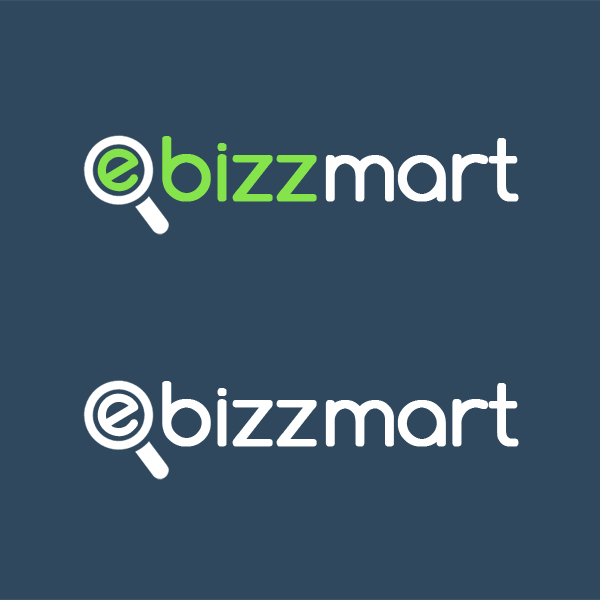
<style>
.page{position:relative;width:600px;height:600px;background:#2f485d}
.page>*{position:absolute;margin:0}
.t1{font:91.3px "Comfortaa";letter-spacing:-0.04em;color:#85e44b;font-weight:bold}
.t2{font:91.3px "Comfortaa";letter-spacing:-0.04em;color:#fefefe;font-weight:bold}
.t3{font:80px "Comfortaa-Bold";color:#85e44b}
.t4{font:91.3px "Comfortaa";letter-spacing:-0.04em;color:#ffffff;font-weight:bold}
.t5{font:80px "Comfortaa-Bold";color:#ffffff}
</style>
<div class="page">
<p class="t1" style="left:162px;top:136px;width:357px;height:66px">bizz <span class="t2">mart</span></p>
<p class="t3" style="left:97px;top:148px;width:42px;height:44px;rotate:-31deg">e</p>
<p class="t4" style="left:162px;top:381px;width:357px;height:66px">bizz mart</p>
<p class="t5" style="left:97px;top:393px;width:42px;height:44px;rotate:-31deg">e</p>
</div>
